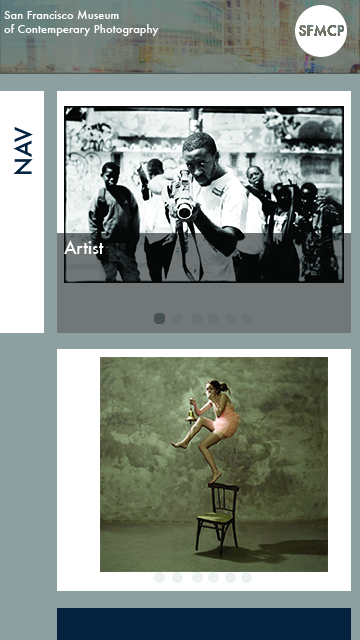
<style>
.page{position:relative;width:360px;height:640px}
.page>*{position:absolute;margin:0}
.t1{font:11.1px/13.9px "Futura-Medium";color:#ffffff}
.t2{font:22.2px "Futura-Medium";color:#03223d}
.t3{font:16.7px "Futura-Medium";color:#ffffff}
</style>
<div class="page">
<p class="t1" style="left:4px;top:10px;width:155px;height:26px">San Francisco Museum <br>of Contemperary Photography</p>
<p class="t2" style="left:13px;top:127px;width:20px;height:47px;rotate:-90deg">NAV</p>
<p class="t3" style="left:64px;top:240px;width:40px;height:14px">Artist</p>
</div>
